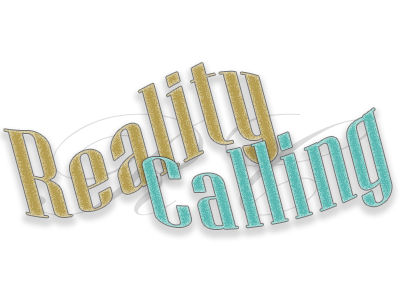
<style>
.page{position:relative;width:400px;height:300px;background:#ffffff}
.page>*{position:absolute;margin:0}
.t1{font:125.3px "NiagaraSolid-Reg";letter-spacing:0.025em;scale:1.2 1}
.t2{font:117.5px "NiagaraSolid-Reg";letter-spacing:0.025em;scale:1.2 1}
</style>
<div class="page">
<p class="t1" style="left:4px;top:63px;width:274px;height:155px;rotate:-15deg">Reality</p>
<p class="t2" style="left:142px;top:108px;width:250px;height:121px;rotate:-15deg">Calling</p>
</div>
